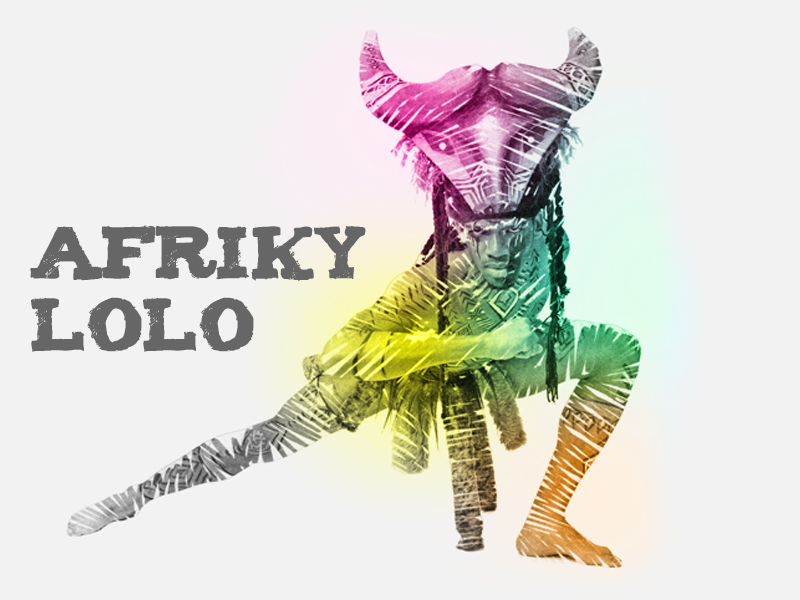
<style>
.page{position:relative;width:800px;height:600px;background:#f2f2f2}
.page>*{position:absolute;margin:0}
.t1{font:60px "Tiza";color:#666666}
</style>
<div class="page">
<p class="t1" style="left:30px;top:225px;width:336px;height:127px">Afriky<br>lolo</p>
</div>
